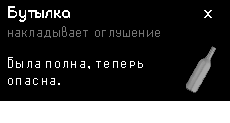
<style>
.page{position:relative;width:230px;height:123px;background:#000000}
.page>*{position:absolute;margin:0}
.t1{font:15.6px "Cruinn-Bold";color:#ffffff}
.t2{font:13.2px "agat-8";color:#747474;scale:0.96 1}
.t3{font:14px "agat-8";color:#ffffff;scale:1.05 1}
</style>
<div class="page">
<p class="t1" style="left:8px;top:6px;width:62px;height:16px">Бутылка</p>
<p class="t1" style="left:204px;top:10px;width:8px;height:8px">х</p>
<p class="t2" style="left:8px;top:26px;width:152px;height:12px">накладывает  оглушение</p>
<p class="t3" style="left:8px;top:57px;width:135px;height:28px">Была полна, теперь <br>опасна.</p>
</div>
